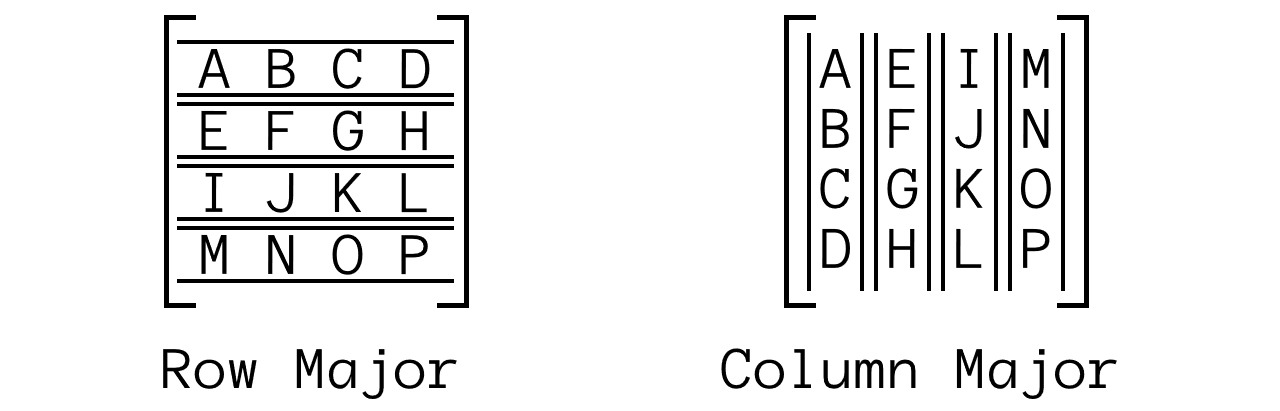
<style>
.page{position:relative;width:1280px;height:411px;background:#ffffff}
.page>*{position:absolute;margin:0}
.t1{font:50px "Anonymous";color:#000000}
</style>
<div class="page">
<p class="t1" style="left:198px;top:48px;width:232px;height:41px">A B C D</p>
<p class="t1" style="left:819px;top:48px;width:32px;height:220px">A<br>B<br>C<br>D</p>
<p class="t1" style="left:887px;top:48px;width:31px;height:220px">E<br>F<br>G<br>H</p>
<p class="t1" style="left:954px;top:48px;width:29px;height:220px">I<br>J<br>K<br>L</p>
<p class="t1" style="left:1020px;top:48px;width:31px;height:220px">M<br>N<br>O<br>P</p>
<p class="t1" style="left:201px;top:110px;width:226px;height:41px">E F G H</p>
<p class="t1" style="left:205px;top:172px;width:222px;height:41px">I J K L</p>
<p class="t1" style="left:201px;top:234px;width:227px;height:41px">M N O P</p>
<p class="t1" style="left:163px;top:349px;width:294px;height:50px">Row Major</p>
<p class="t1" style="left:721px;top:348px;width:396px;height:51px">Column Major</p>
</div>
